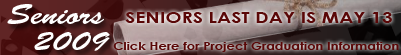
<style>
.page{position:relative;width:401px;height:55px}
.page>*{position:absolute;margin:0}
.t1{font:28.2px "BrushScriptStd";color:#ffffff;scale:1.18 1}
.t2{font:16.5px "CenturyGothic-Bold";color:#5a0707;scale:1.18 1}
.t3{font:11.1px "CenturyGothic-Bold";color:#5a0707;scale:1.18 1}
</style>
<div class="page">
<p class="t1" style="left:7px;top:4px;width:97px;height:20px">Seniors</p>
<p class="t2" style="left:125px;top:12px;width:267px;height:11px">SENIORS LAST DAY IS MAY 13</p>
<p class="t1" style="left:34px;top:32px;width:76px;height:19px">2009</p>
<p class="t3" style="left:113px;top:42px;width:286px;height:10px">Click Here for Project Graduation Information</p>
</div>
